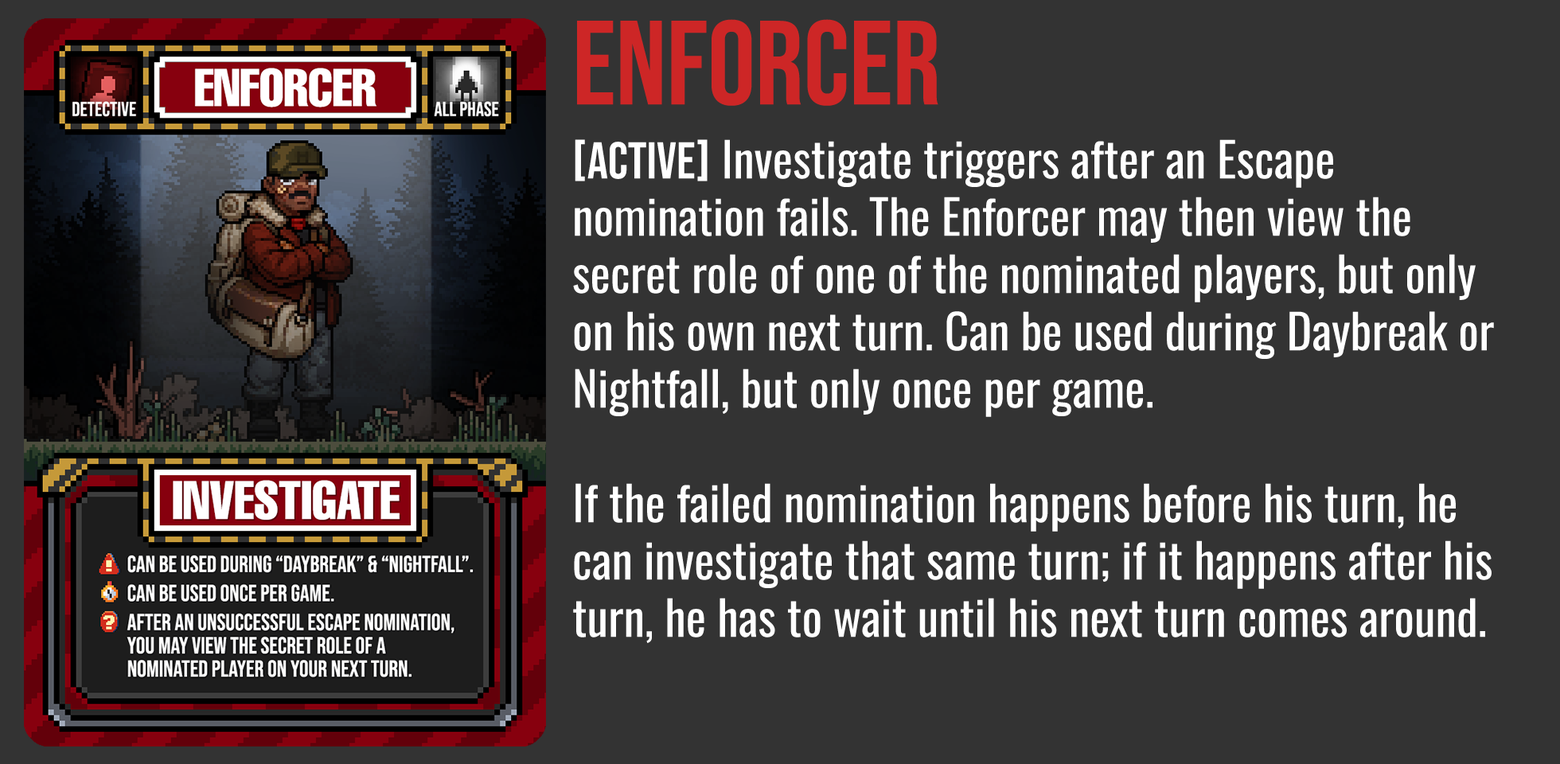
<style>
.page{position:relative;width:1560px;height:764px;background:#333333}
.page>*{position:absolute;margin:0}
.t1{font:119.4px "BebasNeue-Regular";color:#cd2626}
.t2{font:47.8px "Oswald-Regular";color:#ffffff}
.t3{font:51.7px "BebasNeue-Regular";color:#ffffff}
</style>
<div class="page">
<p class="t1" style="left:577px;top:19px;width:362px;height:87px">ENFORCER</p>
<p class="t2" style="left:573px;top:139px;width:921px;height:504px"><span class="t3">[aCTIVE]</span> Investigate triggers after an Escape nomination fails. The Enforcer may then view the secret role of one of the nominated players, but only on his own next turn. Can be used during Daybreak or Nightfall, but only once per game.<br><br>If the failed nomination happens before his turn, he can investigate that same turn; if it happens after his turn, he has to wait until his next turn comes around.</p>
</div>
